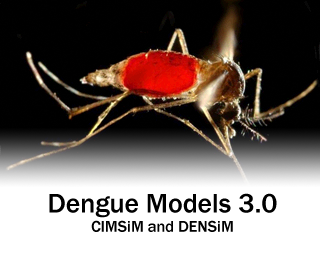
<style>
.page{position:relative;width:320px;height:260px;background:#000000}
.page>*{position:absolute;margin:0}
.t1{font:27.7px "FranklinGothic-Medium";color:#000000}
.t2{font:16.1px "FranklinGothic-Medium";color:#000000}
</style>
<div class="page">
<p class="t1" style="left:49px;top:193px;width:228px;height:39px;text-align:center">Dengue Models 3.0<br><span class="t2">CIMSiM and DENSiM</span></p>
</div>
